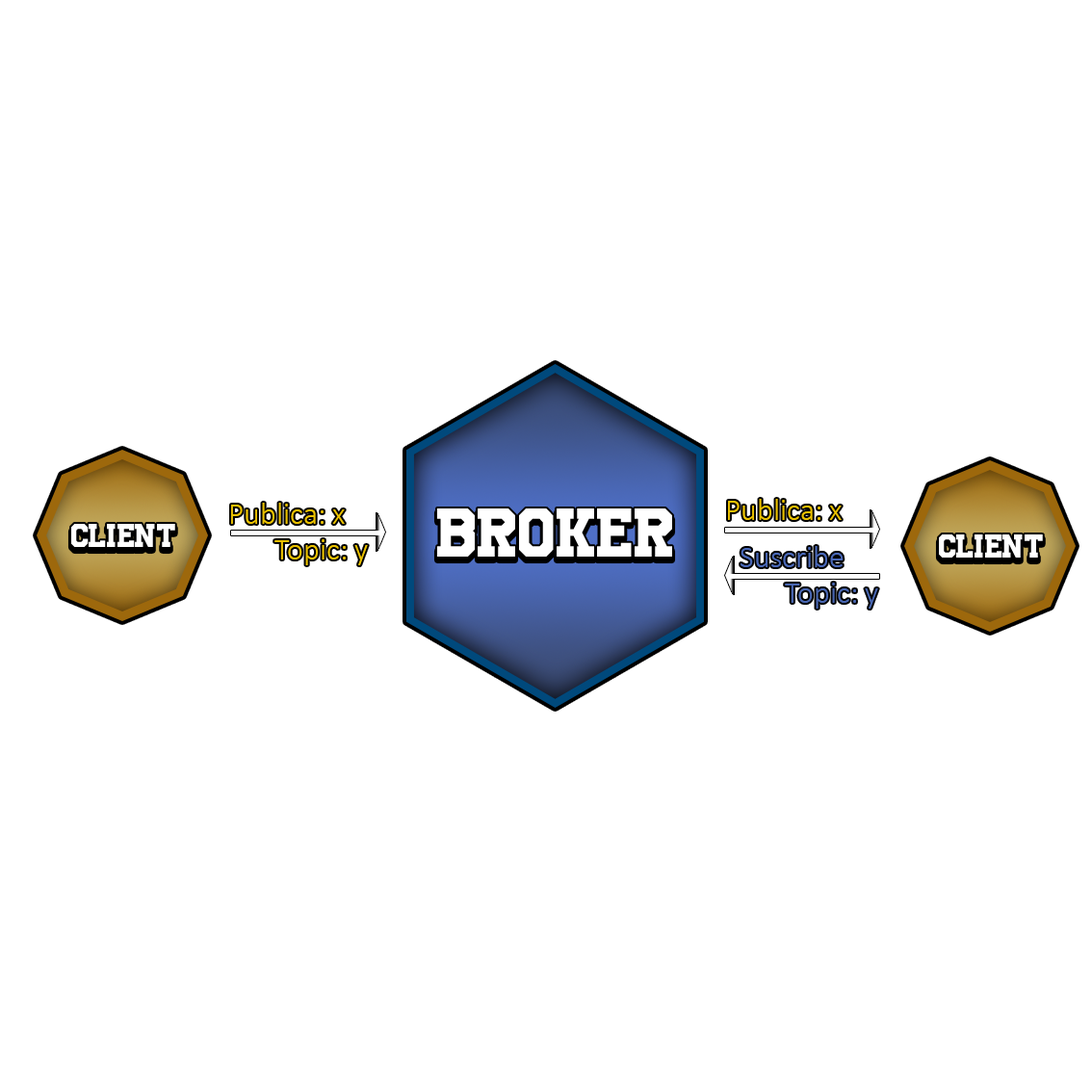
<style>
.page{position:relative;width:1092px;height:1092px;background:#ffffff}
.page>*{position:absolute;margin:0}
.t1{font:30.8px "Calibri-Light";color:#eac100}
.t2{font:47.7px "UniversityRegular";color:#ffffff}
.t3{font:23.1px "UniversityRegular";color:#ffffff}
</style>
<div class="page">
<p class="t1" style="left:231px;top:503px;width:114px;height:21px">Publica: x</p>
<p class="t2" style="left:437px;top:508px;width:235px;height:49px">BROKER</p>
<p class="t1" style="left:728px;top:499px;width:114px;height:21px">Publica: x</p>
<p class="t3" style="left:71px;top:524px;width:104px;height:23px">Client</p>
<p class="t1" style="left:274px;top:539px;width:94px;height:26px">Topic: y</p>
<p class="t3" style="left:939px;top:534px;width:104px;height:24px">Client</p>
</div>
